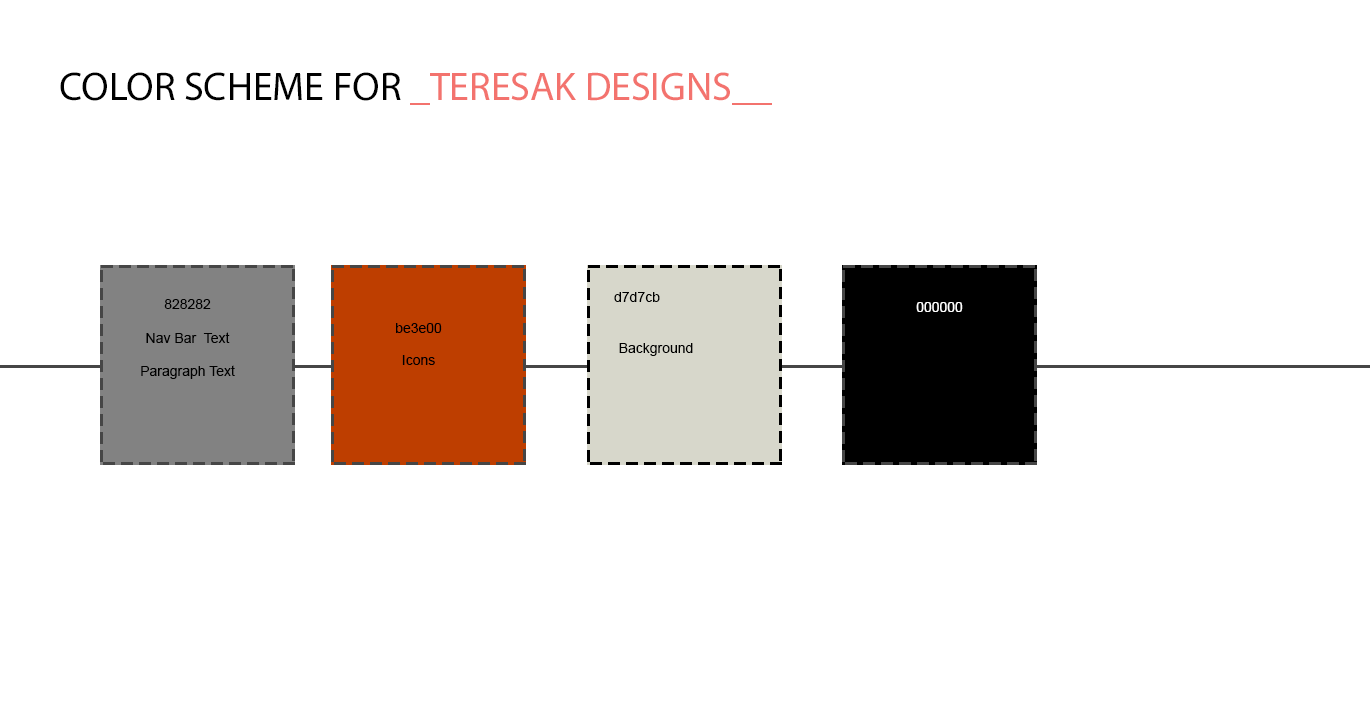
<style>
.page{position:relative;width:1370px;height:712px;background:#ffffff}
.page>*{position:absolute;margin:0}
.t1{font:40px "MyriadPro-Regular";color:#f3736e;text-transform:uppercase}
.t2{font:40px "MyriadPro-Regular";color:#000000;text-transform:uppercase}
.t3{font:14px "ArialMT";color:#000000}
.t4{font:14px "ArialMT";color:#ffffff}
</style>
<div class="page">
<p class="t1" style="left:60px;top:72px;width:712px;height:33px"><span class="t2">Color Scheme for </span>_TeresaK Designs__</p>
<p class="t3" style="left:614px;top:292px;width:46px;height:10px">d7d7cb</p>
<p class="t3" style="left:141px;top:299px;width:94px;height:80px;text-align:center">828282<br><br>Nav Bar  Text<br><br>Paragraph Text</p>
<p class="t4" style="left:916px;top:302px;width:47px;height:10px">000000</p>
<p class="t3" style="left:396px;top:323px;width:46px;height:10px">be3e00</p>
<p class="t3" style="left:619px;top:343px;width:74px;height:13px">Background</p>
<p class="t3" style="left:402px;top:355px;width:33px;height:10px">Icons</p>
</div>
